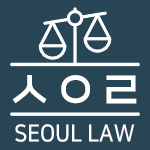
<style>
.page{position:relative;width:150px;height:150px;background:#274555}
.page>*{position:absolute;margin:0}
.t1{font:55px "NanumSquareOTFB";color:#ffffff;scale:0.9 1}
.t2{font:23.8px "NanumSquareOTFB";color:#ffffff;scale:0.91 1}
</style>
<div class="page">
<p class="t1" style="left:12px;top:75px;width:125px;height:29px">ㅅㅇㄹ</p>
<p class="t2" style="left:15px;top:124px;width:120px;height:18px">SEOUL LAW</p>
</div>
